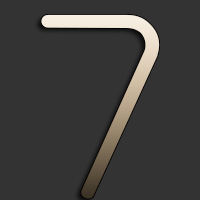
<style>
.page{position:relative;width:200px;height:200px;background:#333333}
.page>*{position:absolute;margin:0}
.t1{font:241.8px "GreyscaleBasic-Regular";scale:1.08 1}
</style>
<div class="page">
<p class="t1" style="left:41px;top:14px;width:119px;height:185px">7</p>
</div>
